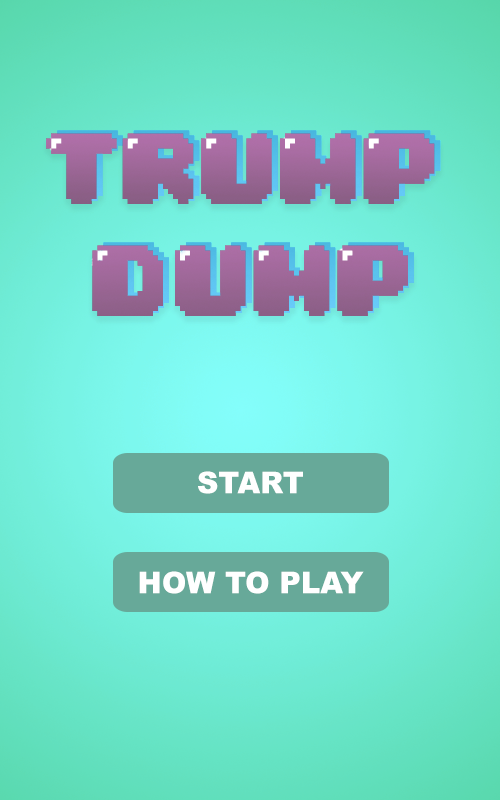
<style>
.page{position:relative;width:500px;height:800px}
.page>*{position:absolute;margin:0}
.t1{font:30.1px "Arial-Black";color:#ffffff}
</style>
<div class="page">
<p class="t1" style="left:198px;top:471px;width:105px;height:23px">START</p>
<p class="t1" style="left:139px;top:571px;width:225px;height:23px">HOW TO PLAY</p>
</div>
